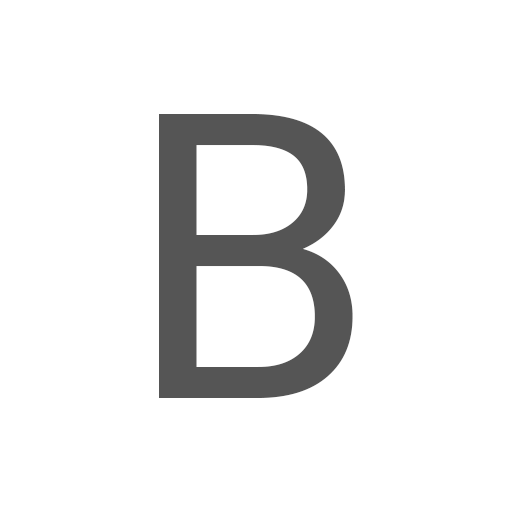
<style>
.page{position:relative;width:512px;height:512px;background:#ffffff}
.page>*{position:absolute;margin:0}
.t1{font:400px "Roboto-Regular";color:#555555}
</style>
<div class="page">
<p class="t1" style="left:159px;top:114px;width:194px;height:284px">B</p>
</div>
